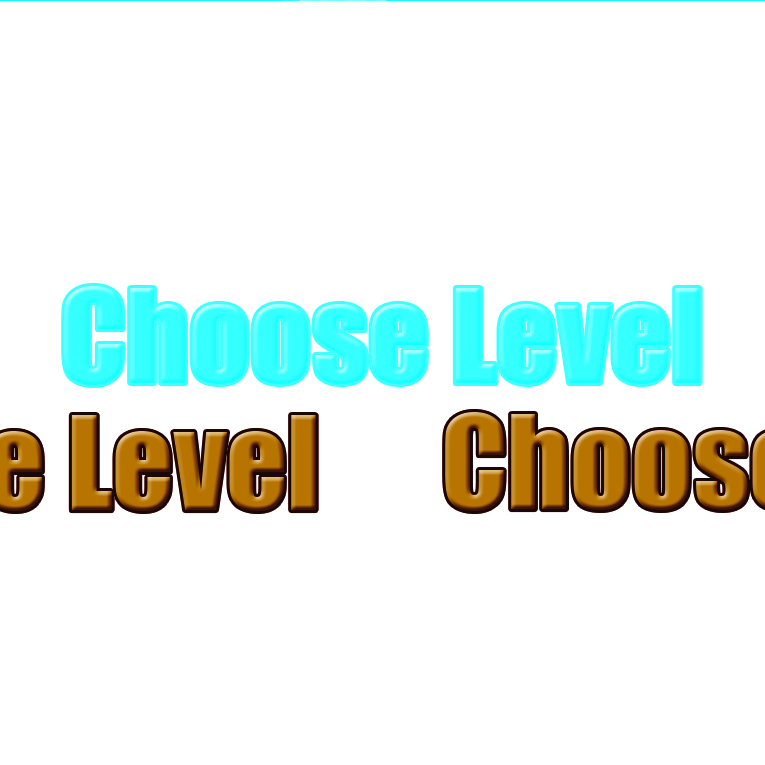
<style>
.page{position:relative;width:765px;height:765px;background:#ffffff}
.page>*{position:absolute;margin:0}
.t1{font:120px "Impact";color:#35ffff}
</style>
<div class="page">
<p class="t1" style="left:64px;top:285px;width:636px;height:99px">Choose Level</p>
</div>
